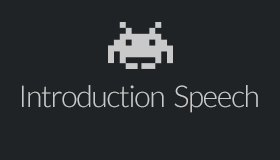
<style>
.page{position:relative;width:280px;height:160px;background:#202326}
.page>*{position:absolute;margin:0}
.t1{font:30px "Lato-Light";letter-spacing:-0.04em;color:#c9c9c9}
</style>
<div class="page">
<p class="t1" style="left:22px;top:85px;width:236px;height:28px">Introduction  Speech</p>
</div>
